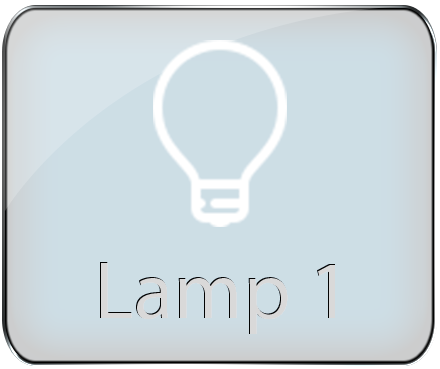
<style>
.page{position:relative;width:440px;height:369px;background:#cddee5}
.page>*{position:absolute;margin:0}
.t1{font:83.2px "MyriadPro-Regular";color:#d9d9d9}
</style>
<div class="page">
<p class="t1" style="left:100px;top:262px;width:235px;height:72px">Lamp 1</p>
</div>
